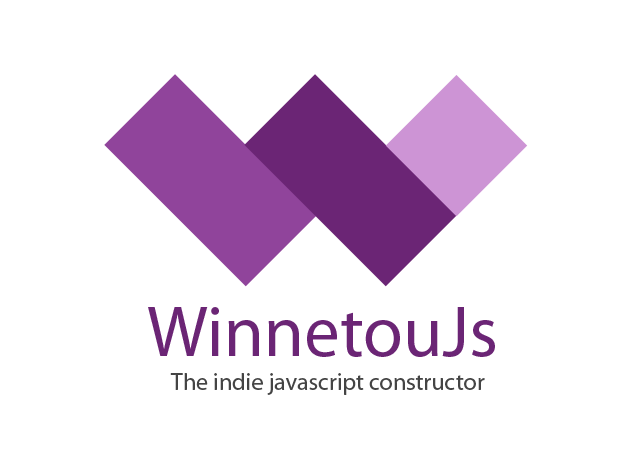
<style>
.page{position:relative;width:627px;height:457px;background:#ffffff}
.page>*{position:absolute;margin:0}
.t1{font:72px "MyriadPro-Regular";color:#6b2575}
.t2{font:24px "MyriadPro-Regular";color:#444444}
</style>
<div class="page">
<p class="t1" style="left:148px;top:307px;width:347px;height:50px">WinnetouJs</p>
<p class="t2" style="left:170px;top:373px;width:315px;height:22px">The indie javascript constructor</p>
</div>
